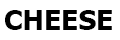
<style>
.page{position:relative;width:120px;height:40px;background:#ffffff}
.page>*{position:absolute;margin:0}
.t1{font:28px "Tahoma-Bold";color:#000000}
</style>
<div class="page">
<p class="t1" style="left:5px;top:10px;width:107px;height:20px">CHEESE</p>
</div>
